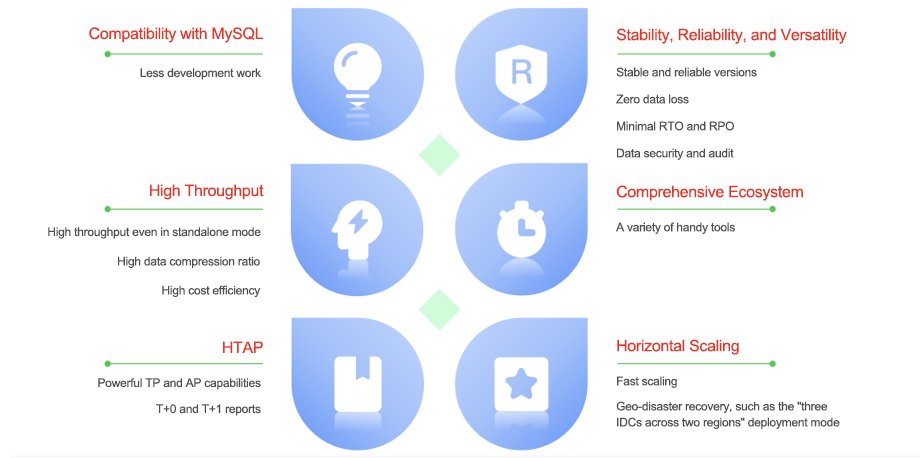
<style>
.page{position:relative;width:920px;height:458px;background:#ffffff}
.page>*{position:absolute;margin:0}
.t1{font:16px "ArialMT";letter-spacing:-0.02em;color:#ea3525}
.t2{font:12px "ArialMT";letter-spacing:-0.02em;color:#4f4f4f}
.t3{font:12px/27px "ArialMT";letter-spacing:-0.02em;color:#4f4f4f}
.t4{font:12px/16px "ArialMT";letter-spacing:-0.02em;color:#4f4f4f}
</style>
<div class="page">
<p class="t1" style="left:89px;top:27px;width:174px;height:16px">Compatibility with MySQL</p>
<p class="t1" style="left:616px;top:28px;width:231px;height:16px">Stability, Reliability, and Versatility</p>
<p class="t2" style="left:140px;top:68px;width:121px;height:12px">Less development work</p>
<p class="t3" style="left:616px;top:67px;width:141px;height:93px">Stable and reliable versions<br>Zero data loss<br>Minimal RTO and RPO<br>Data security and audit</p>
<p class="t1" style="left:150px;top:184px;width:114px;height:16px">High Throughput</p>
<p class="t1" style="left:616px;top:185px;width:187px;height:16px">Comprehensive Ecosystem</p>
<p class="t2" style="left:616px;top:222px;width:119px;height:12px">A variety of handy tools</p>
<p class="t2" style="left:48px;top:227px;width:213px;height:12px">High throughput even in standalone mode</p>
<p class="t2" style="left:118px;top:256px;width:142px;height:12px">High data compression ratio</p>
<p class="t2" style="left:162px;top:285px;width:99px;height:12px">High cost efficiency</p>
<p class="t1" style="left:223px;top:341px;width:40px;height:12px">HTAP</p>
<p class="t1" style="left:617px;top:339px;width:122px;height:16px">Horizontal Scaling</p>
<p class="t2" style="left:617px;top:376px;width:60px;height:12px">Fast scaling</p>
<p class="t2" style="left:98px;top:378px;width:163px;height:12px">Powerful TP and AP capabilities</p>
<p class="t4" style="left:616px;top:401px;width:224px;height:28px">Geo-disaster recovery, such as the "three IDCs across two regions" deployment mode</p>
<p class="t2" style="left:156px;top:404px;width:105px;height:12px">T+0 and T+1 reports</p>
</div>
